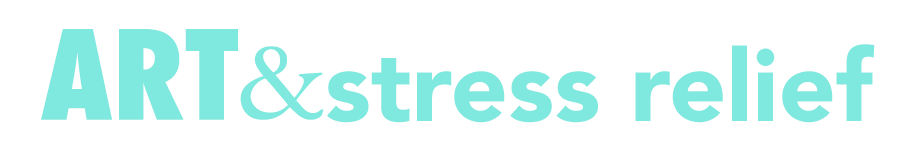
<style>
.page{position:relative;width:900px;height:150px;background:#ffffff}
.page>*{position:absolute;margin:0}
.t1{font:120px "Futura-CondensedExtraBold";color:#7fe8df}
.t2{font:120px "Garamond";color:#7fe8df}
.t3{font:100px "Avenir-Black";color:#7fe8df}
</style>
<div class="page">
<p class="t1" style="left:41px;top:29px;width:197px;height:91px">ART</p>
<p class="t2" style="left:240px;top:46px;width:84px;height:74px">&amp;</p>
<p class="t3" style="left:327px;top:44px;width:548px;height:79px">stress relief</p>
</div>
